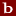
<style>
.page{position:relative;width:16px;height:16px;background:#7f0100}
.page>*{position:absolute;margin:0}
.t1{font:13.6px "Georgia";letter-spacing:-0.02em;color:#ffffff;scale:1.35 1}
</style>
<div class="page">
<p class="t1" style="left:2px;top:2px;width:11px;height:12px">b</p>
</div>
